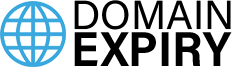
<style>
.page{position:relative;width:232px;height:67px;background:#ffffff}
.page>*{position:absolute;margin:0}
.t1{font:40.6px/34.5px "AcuminConcept-Regular";color:#000000}
.t2{font:49.2px/36.9px "AcuminConcept-SemiCondensedBold";color:#000000}
</style>
<div class="page">
<p class="t1" style="left:74px;top:0px;width:158px;height:66px">DOMAIN<br><span class="t2">EXPIRY</span></p>
</div>
